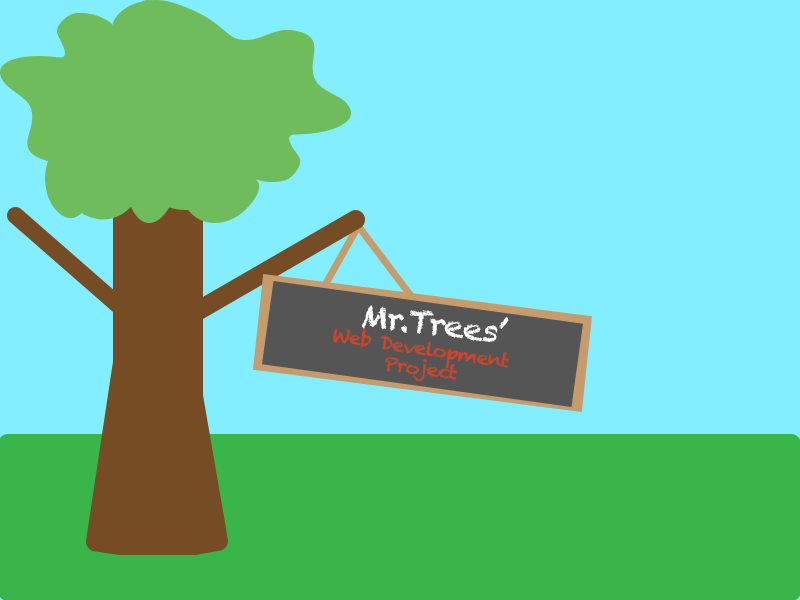
<style>
.page{position:relative;width:800px;height:600px;background:#83eeff}
.page>*{position:absolute;margin:0}
.t1{font:30px "Chalkduster";letter-spacing:-0.05em;color:#ffffff;scale:1.1 1}
.t2{font:18px "Chalkduster";letter-spacing:-0.05em;color:#d24424;scale:1.1 1}
</style>
<div class="page">
<p class="t1" style="left:362px;top:305px;width:147px;height:37px;rotate:7deg">Mr.Trees’</p>
<p class="t2" style="left:332px;top:328px;width:178px;height:41px;rotate:9deg">Web Development</p>
<p class="t2" style="left:385px;top:357px;width:72px;height:25px;rotate:7deg">Project</p>
</div>
